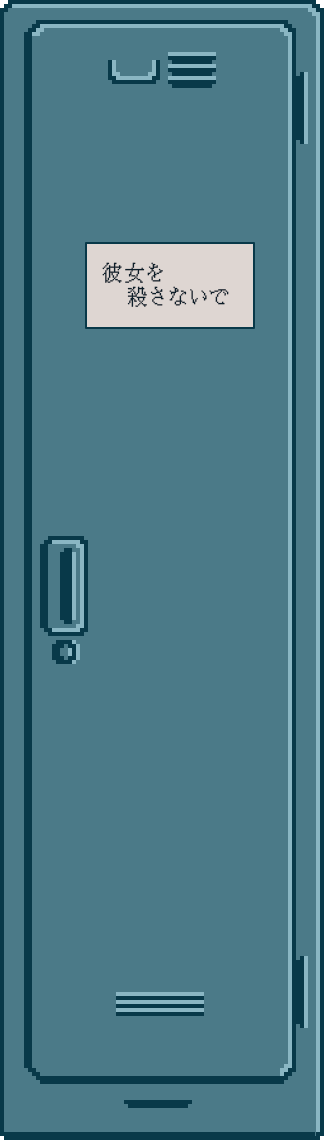
<style>
.page{position:relative;width:324px;height:1140px;background:#4b7a88}
.page>*{position:absolute;margin:0}
.t1{font:20px "KH-Dot-kagurazaka-16";letter-spacing:0.12em;color:#0a192d}
</style>
<div class="page">
<p class="t1" style="left:102px;top:262px;width:127px;height:45px;text-align:center">彼女を<br>　　　　殺さないで</p>
</div>
